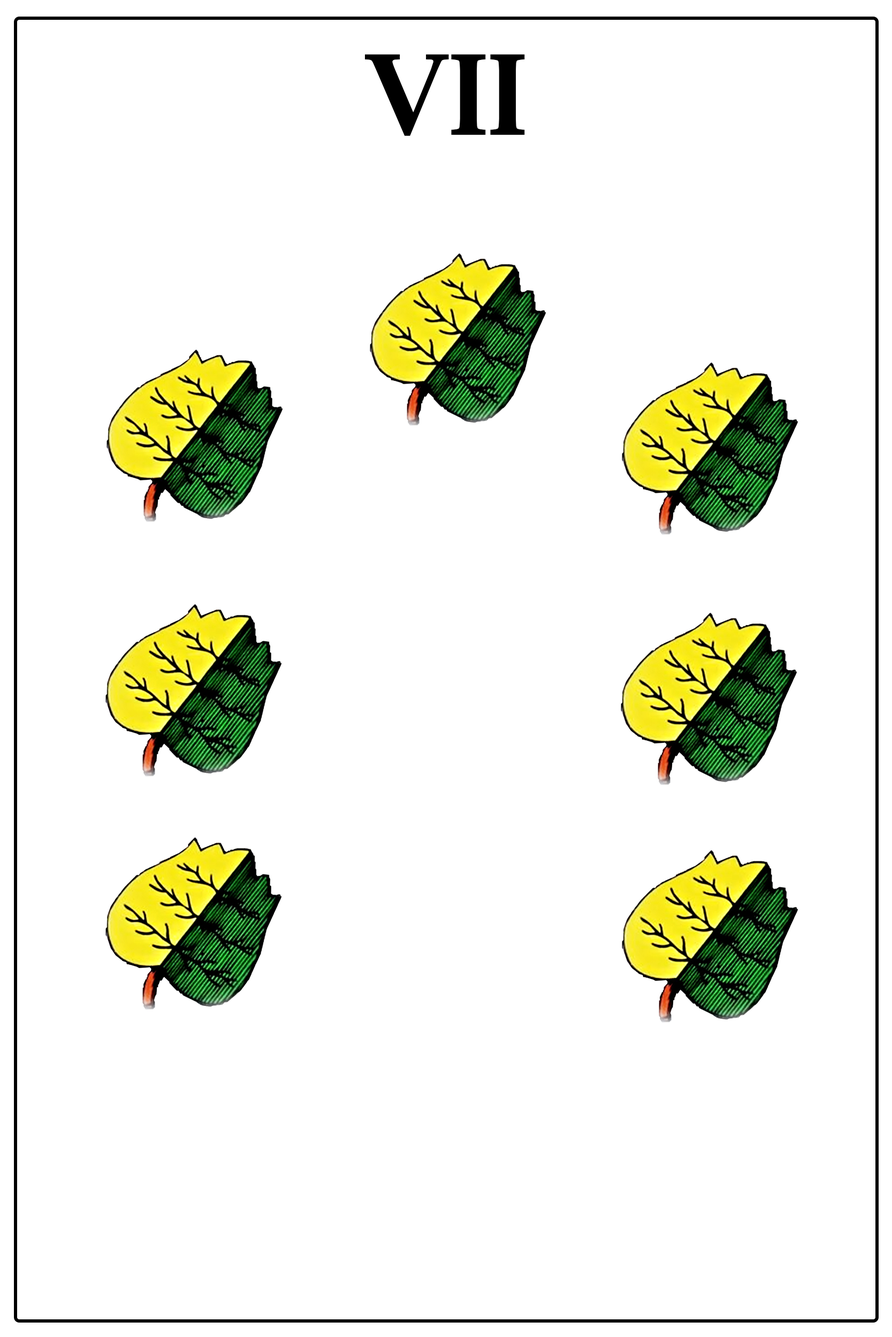
<style>
.page{position:relative;width:892px;height:1337px;background:#ffffff}
.page>*{position:absolute;margin:0}
.t1{font:111.4px "LucidaBright-Demi";color:#000000}
</style>
<div class="page">
<p class="t1" style="left:365px;top:54px;width:160px;height:82px">VII</p>
</div>
